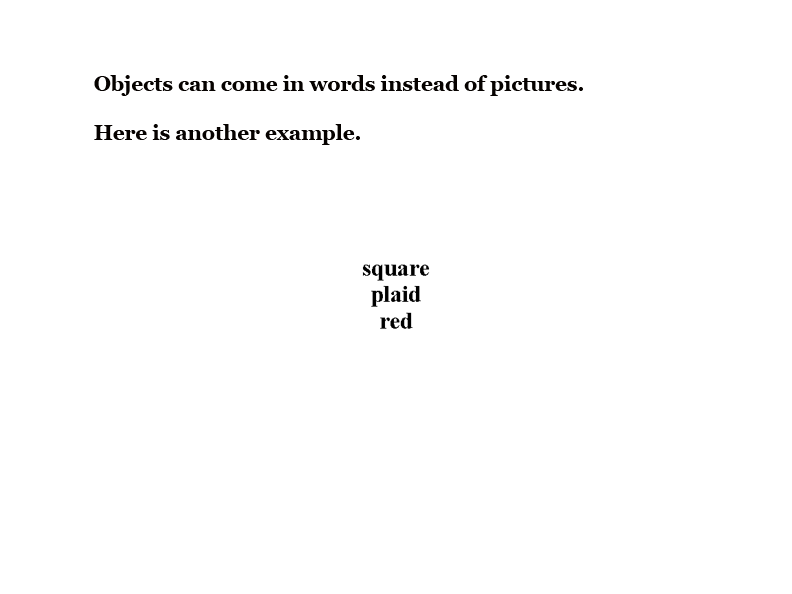
<style>
.page{position:relative;width:792px;height:594px;background:#ffffff}
.page>*{position:absolute;margin:0}
.t1{font:20.6px "Georgia-Bold";color:#060200}
</style>
<div class="page">
<p class="t1" style="left:94px;top:75px;width:489px;height:70px">Objects can come in words instead of pictures.<br><br>Here is another example.</p>
</div>
